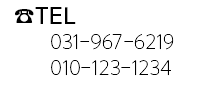
<style>
.page{position:relative;width:201px;height:92px;background:#ffffff}
.page>*{position:absolute;margin:0}
.t1{font:21px "YoonGothicPro710";color:#000000}
.t2{font:21px "YoonGothicPro770";color:#000000}
</style>
<div class="page">
<p class="t1" style="left:15px;top:7px;width:159px;height:69px"><span class="t2">☎TEL<br></span> 031-967-6219<br> 010-123-1234</p>
</div>
